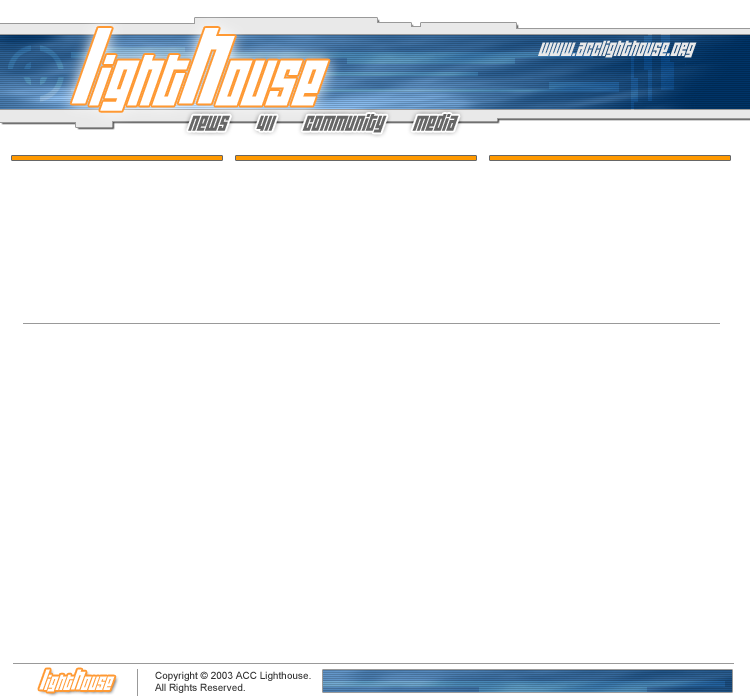
<style>
.page{position:relative;width:750px;height:700px;background:#ffffff}
.page>*{position:absolute;margin:0}
.t1{font:60px "WideawakeBlack";color:#ffffff;font-style:italic}
.t2{font:90px "WideawakeBlack";color:#ffffff;font-style:italic}
.t3{font:18px "WideawakeBlack";color:#e9e9e9;font-style:italic}
.t4{font:20px "WideawakeBlack";color:#666666;font-style:italic}
.t5{font:18px "WideawakeBlack";color:#ffffff;font-style:italic}
.t6{font:24px "WideawakeBlack";color:#ffffff;font-style:italic}
.t7{font:10px "ArialMT";color:#333333}
</style>
<div class="page">
<p class="t1" style="left:71px;top:28px;width:258px;height:83px"><span class="t2">l</span>ight<span class="t2">h</span>ouse</p>
<p class="t3" style="left:538px;top:40px;width:159px;height:18px">www.acclighthouse.org</p>
<p class="t4" style="left:188px;top:114px;width:271px;height:19px">news   411   community   media</p>
<p class="t5" style="left:39px;top:669px;width:76px;height:23px"><span class="t6">l</span>ight<span class="t6">h</span>ouse</p>
<p class="t7" style="left:155px;top:671px;width:156px;height:22px">Copyright © 2003 ACC Lighthouse.<br>All Rights Reserved.</p>
</div>
